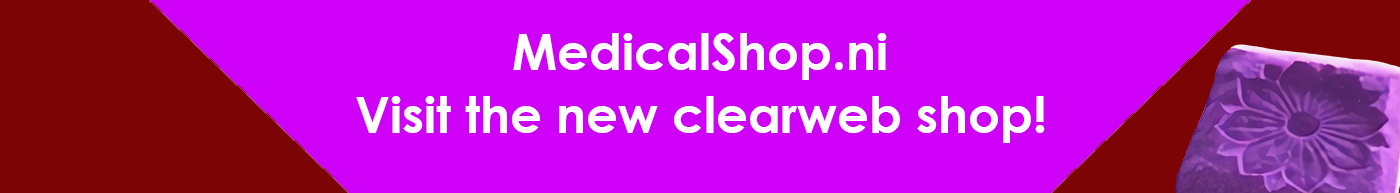
<style>
.page{position:relative;width:1400px;height:193px;background:#ce00f8}
.page>*{position:absolute;margin:0}
.t1{font:50px "CenturyGothic-Bold";color:#ffffff}
</style>
<div class="page">
<p class="t1" style="left:513px;top:33px;width:374px;height:47px">MedicalShop.ni</p>
<p class="t1" style="left:356px;top:96px;width:689px;height:47px">Visit the new clearweb shop!</p>
</div>
